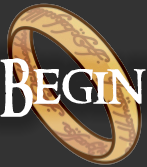
<style>
.page{position:relative;width:147px;height:167px;background:#333333}
.page>*{position:absolute;margin:0}
.t1{font:55.6px "RingbearerMedium";color:#ffffff}
</style>
<div class="page">
<p class="t1" style="left:0px;top:58px;width:146px;height:59px">Begin</p>
</div>
